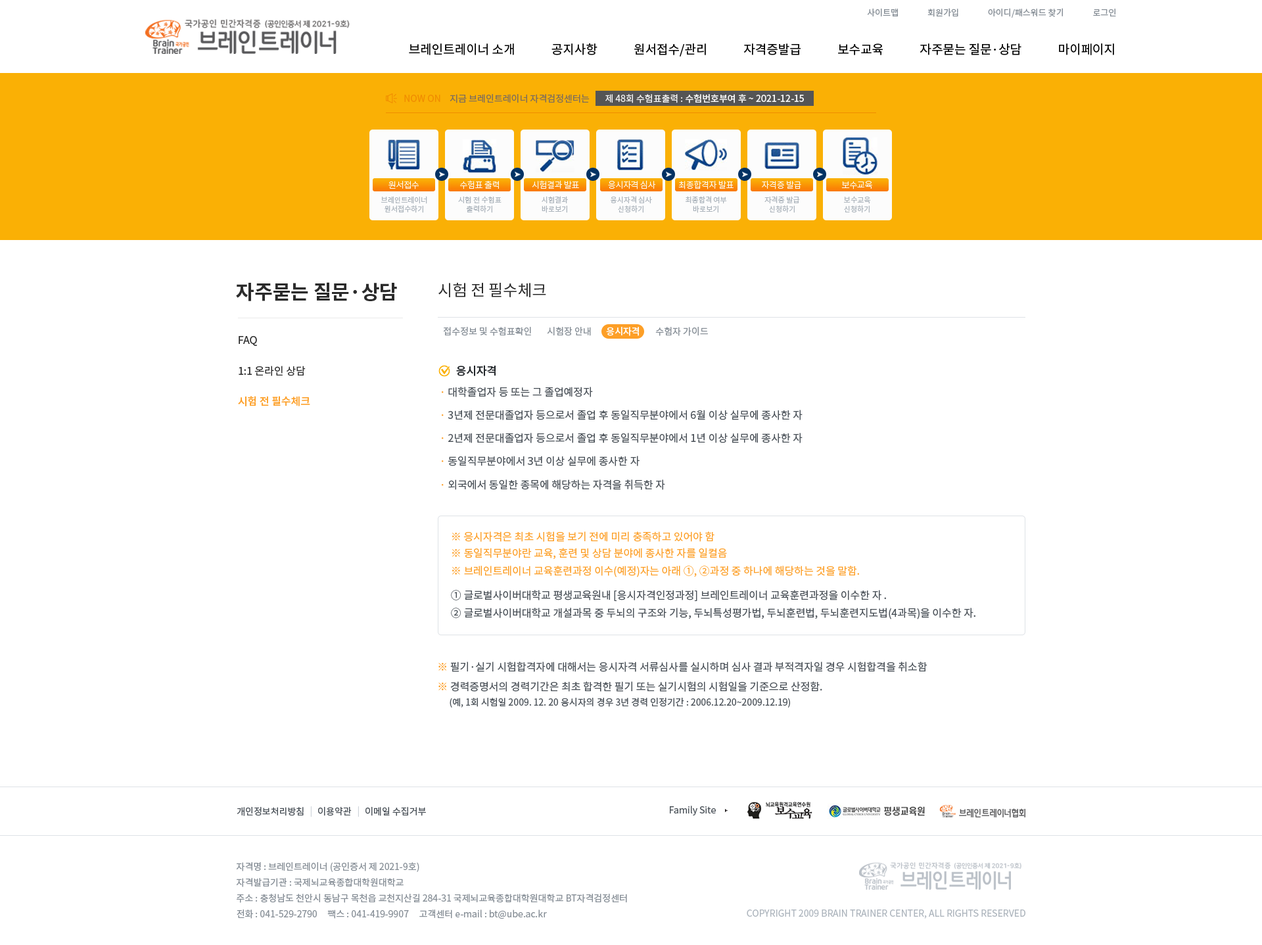
<style>
.page{position:relative;width:1262px;height:945px;background:#ffffff}
.page>*{position:absolute;margin:0}
.t1{font:8.5px "NotoSansCJKkr-Regular";letter-spacing:0.001em;color:#868e96}
.t2{font:12.5px "NotoSansCJKkr-Regular";color:#000000}
.t3{font:9.2px "NotoSansCJKkr-Regular";color:#f08c00}
.t4{font:9.2px "NotoSansCJKkr-Regular";color:#7c6d5d}
.t5{font:9.2px "NotoSansCJKkr-Medium";color:#f8f8f8}
.t6{font:9.2px "NotoSansCJKkr-Regular";color:#f8f8f8}
.t7{font:8.5px "NotoSansCJKkr-Light";letter-spacing:-0.025em;color:#fcfcfc}
.t8{font:7.2px/9.2px "NotoSansCJKkr-Regular";color:#adb5bd}
.t9{font:19.7px "NotoSansCJKkr-Bold";color:#2b2b2b}
.t10{font:15.8px "NotoSansCJKkr-Regular";color:#2b2b2b}
.t11{font:9.2px "NotoSansCJKkr-Regular";color:#868e96}
.t12{font:9.2px "NotoSansCJKkr-Medium";color:#ffffff}
.t13{font:10.5px "NotoSansCJKkr-Regular";color:#2b2b2b}
.t14{font:11.2px "NotoSansCJKkr-Medium";color:#212529}
.t15{font:10.5px "NotoSansCJKkr-Regular";color:#495057}
.t16{font:10.5px "NotoSansCJKkr-Regular";color:#fd9f27}
.t17{font:10.5px "NotoSansCJKkr-Medium";color:#fd9f27}
.t18{font:9.2px "NotoSansCJKkr-Regular";color:#495057}
.t19{font:9.2px "NotoSansCJKkr-Regular";color:#ced4da}
.t20{font:9.2px/15.8px "NotoSansCJKkr-Regular";color:#868e96}
.t21{font:9.2px "NotoSansCJKkr-Regular";color:#adb5bd}
</style>
<div class="page">
<p class="t1" style="left:867px;top:8px;width:249px;height:10px">사이트맵               회원가입               아이디/패스워드 찾기               로그인</p>
<p class="t2" style="left:409px;top:43px;width:705px;height:14px">브레인트레이너 소개             공지사항             원서접수/관리             자격증발급             보수교육             자주묻는 질문·상담             마이페이지</p>
<p class="t3" style="left:404px;top:95px;width:36px;height:7px">NOW ON</p>
<p class="t4" style="left:450px;top:94px;width:140px;height:9px">지금 브레인트레이너 자격검정센터는</p>
<p class="t5" style="left:605px;top:94px;width:199px;height:9px"><span class="t6">제 48회 수험표출력 : </span>수험번호부여 후 ~ 2021-12-15</p>
<p class="t7" style="left:389px;top:181px;width:30px;height:8px">원서접수</p>
<p class="t7" style="left:460px;top:180px;width:39px;height:9px">수험표 출력</p>
<p class="t7" style="left:532px;top:180px;width:47px;height:9px">시험결과 발표</p>
<p class="t7" style="left:608px;top:180px;width:48px;height:9px">응시자격 심사</p>
<p class="t7" style="left:678px;top:180px;width:56px;height:9px">최종합격자 발표</p>
<p class="t7" style="left:762px;top:180px;width:39px;height:9px">자격증 발급</p>
<p class="t7" style="left:841px;top:181px;width:31px;height:8px">보수교육</p>
<p class="t8" style="left:381px;top:196px;width:46px;height:17px;text-align:center">브레인트레이너<br>원서접수하기</p>
<p class="t8" style="left:458px;top:196px;width:44px;height:17px;text-align:center">시험 전 수험표<br>출력하기</p>
<p class="t8" style="left:542px;top:196px;width:26px;height:17px;text-align:center">시험결과<br>바로보기</p>
<p class="t8" style="left:611px;top:196px;width:41px;height:17px;text-align:center">응시자격 심사<br>신청하기</p>
<p class="t8" style="left:686px;top:196px;width:41px;height:17px;text-align:center">최종합격 여부<br>바로보기</p>
<p class="t8" style="left:765px;top:196px;width:35px;height:17px;text-align:center">자격증 발급<br>신청하기</p>
<p class="t8" style="left:844px;top:196px;width:27px;height:17px;text-align:center">보수교육<br>신청하기</p>
<p class="t9" style="left:236px;top:282px;width:161px;height:19px">자주묻는 질문·상담</p>
<p class="t10" style="left:438px;top:283px;width:108px;height:14px">시험 전 필수체크</p>
<p class="t11" style="left:443px;top:327px;width:88px;height:9px">접수정보 및 수험표확인</p>
<p class="t11" style="left:547px;top:327px;width:44px;height:9px">시험장 안내</p>
<p class="t12" style="left:606px;top:327px;width:33px;height:9px">응시자격</p>
<p class="t11" style="left:655px;top:327px;width:53px;height:9px">수험자 가이드</p>
<p class="t13" style="left:239px;top:336px;width:18px;height:10px">FAQ</p>
<p class="t13" style="left:239px;top:366px;width:67px;height:10px">1:1 온라인 상담</p>
<p class="t14" style="left:456px;top:365px;width:40px;height:11px">응시자격</p>
<p class="t15" style="left:442px;top:387px;width:151px;height:10px"><span class="t16">· </span>대학졸업자 등 또는 그 졸업예정자</p>
<p class="t17" style="left:238px;top:396px;width:72px;height:10px">시험 전 필수체크</p>
<p class="t15" style="left:442px;top:410px;width:361px;height:10px"><span class="t16">· </span>3년제 전문대졸업자 등으로서 졸업 후 동일직무분야에서 6월 이상 실무에 종사한 자</p>
<p class="t15" style="left:442px;top:433px;width:361px;height:10px"><span class="t16">· </span>2년제 전문대졸업자 등으로서 졸업 후 동일직무분야에서 1년 이상 실무에 종사한 자</p>
<p class="t15" style="left:442px;top:456px;width:198px;height:10px"><span class="t16">· </span>동일직무분야에서 3년 이상 실무에 종사한 자</p>
<p class="t15" style="left:442px;top:479px;width:223px;height:11px"><span class="t16">· </span>외국에서 동일한 종목에 해당하는 자격을 취득한 자</p>
<p class="t16" style="left:452px;top:531px;width:263px;height:11px">※ 응시자격은 최초 시험을 보기 전에 미리 충족하고 있어야 함</p>
<p class="t16" style="left:452px;top:548px;width:275px;height:11px">※ 동일직무분야란 교육, 훈련 및 상담 분야에 종사한 자를 일컬음</p>
<p class="t16" style="left:452px;top:565px;width:407px;height:12px">※ 브레인트레이너 교육훈련과정 이수(예정)자는 아래 ①, ②과정 중 하나에 해당하는 것을 말함.</p>
<p class="t15" style="left:451px;top:590px;width:435px;height:11px">① 글로벌사이버대학교 평생교육원내 [응시자격인정과정] 브레인트레이너 교육훈련과정을 이수한 자 .</p>
<p class="t15" style="left:451px;top:607px;width:525px;height:12px">② 글로벌사이버대학교 개설과목 중 두뇌의 구조와 기능, 두뇌특성평가법, 두뇌훈련법, 두뇌훈련지도법(4과목)을 이수한 자.</p>
<p class="t15" style="left:438px;top:661px;width:490px;height:11px"><span class="t16">※</span> 필기·실기 시험합격자에 대해서는 응시자격 서류심사를 실시하며 심사 결과 부적격자일 경우 시험합격을 취소함</p>
<p class="t15" style="left:438px;top:681px;width:384px;height:11px"><span class="t16">※</span> 경력증명서의 경력기간은 최초 합격한 필기 또는 실기시험의 시험일을 기준으로 산정함.</p>
<p class="t18" style="left:450px;top:698px;width:340px;height:9px">(예, 1회 시험일 2009. 12. 20 응시자의 경우 3년 경력 인정기간 : 2006.12.20~2009.12.19)</p>
<p class="t18" style="left:237px;top:807px;width:67px;height:9px">개인정보처리방침</p>
<p class="t19" style="left:310px;top:806px;width:2px;height:11px">|</p>
<p class="t18" style="left:318px;top:807px;width:34px;height:9px">이용약관</p>
<p class="t19" style="left:358px;top:806px;width:1px;height:11px">|</p>
<p class="t18" style="left:366px;top:807px;width:60px;height:9px">이메일 수집거부</p>
<p class="t18" style="left:670px;top:805px;width:46px;height:10px">Family Site</p>
<p class="t20" style="left:236px;top:862px;width:391px;height:57px">자격명 : 브레인트레이너 (공인증서 제 2021-9호)<br>자격발급기관 : 국제뇌교육종합대학원대학교<br>주소 : 충청남도 천안시 동남구 목천읍 교천지산길 284-31 국제뇌교육종합대학원대학교 BT자격검정센터<br>전화 : 041-529-2790     팩스 : 041-419-9907     고객센터 e-mail : bt@ube.ac.kr</p>
<p class="t21" style="left:747px;top:909px;width:279px;height:9px">COPYRIGHT 2009 BRAIN TRAINER CENTER, ALL RIGHTS RESERVED</p>
</div>
